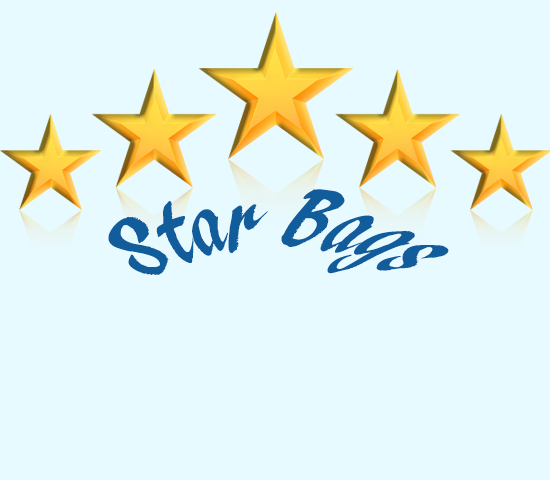
<style>
.page{position:relative;width:550px;height:480px;background:#e7faff}
.page>*{position:absolute;margin:0}
.t1{font:65px "ARBLANCA";color:#115c9b}
</style>
<div class="page">
<p class="t1" style="left:108px;top:189px;width:341px;height:86px">Star Bags</p>
</div>
